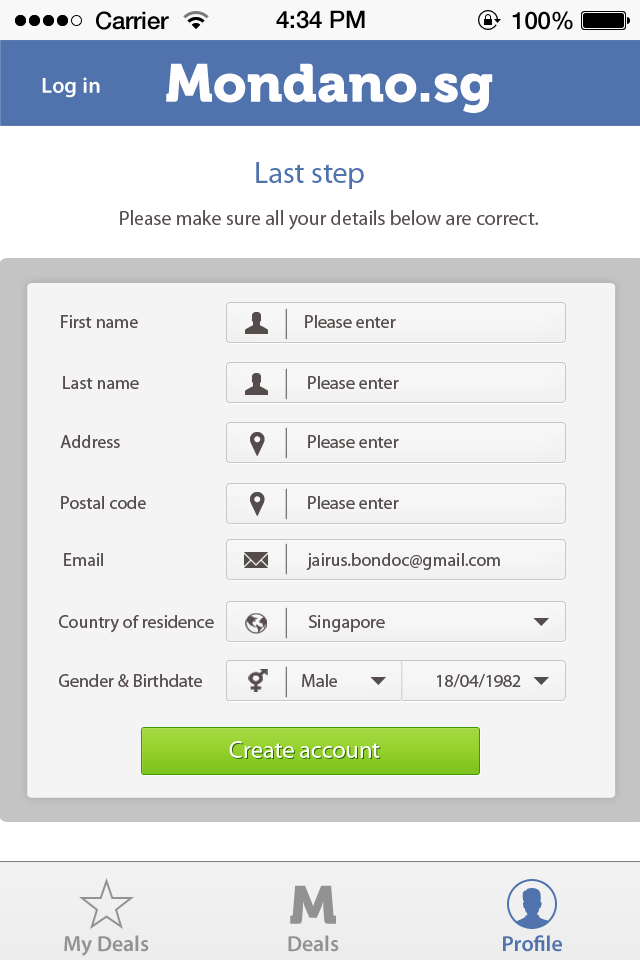
<style>
.page{position:relative;width:640px;height:960px;background:#f4f4f4}
.page>*{position:absolute;margin:0}
.t1{font:24px "HelveticaNeue-Medium";color:#000000}
.t2{font:53.3px "Museo900-Regular";color:#ffffff}
.t3{font:22px "MyriadPro-Semibold";color:#ffffff}
.t4{font:30px "MyriadPro-Regular";color:#5173ad}
.t5{font:20px "MyriadPro-Regular";color:#554c4c}
.t6{font:18px "MyriadPro-Regular";color:#554c4c}
.t7{font:24px "MyriadPro-Regular";color:#ffffff}
.t8{font:53.3px "Museo900-Regular";color:#929292}
.t9{font:22px "MyriadPro-Semibold";color:#929292}
.t10{font:22px "MyriadPro-Semibold";color:#5173ad}
</style>
<div class="page">
<p class="t1" style="left:96px;top:11px;width:73px;height:19px">Carrier</p>
<p class="t1" style="left:276px;top:10px;width:89px;height:19px">4:34 PM</p>
<p class="t1" style="left:512px;top:11px;width:61px;height:19px">100%</p>
<p class="t2" style="left:166px;top:63px;width:327px;height:50px">Mondano.sg</p>
<p class="t3" style="left:42px;top:77px;width:58px;height:21px">Log in</p>
<p class="t4" style="left:256px;top:162px;width:108px;height:27px">Last step</p>
<p class="t5" style="left:120px;top:210px;width:418px;height:20px">Please make sure all your details below are correct.</p>
<p class="t6" style="left:61px;top:315px;width:77px;height:13px">First name</p>
<p class="t6" style="left:305px;top:315px;width:91px;height:13px">Please enter</p>
<p class="t6" style="left:63px;top:376px;width:76px;height:13px">Last name</p>
<p class="t6" style="left:308px;top:376px;width:91px;height:13px">Please enter</p>
<p class="t6" style="left:60px;top:435px;width:60px;height:13px">Address</p>
<p class="t6" style="left:308px;top:435px;width:91px;height:13px">Please enter</p>
<p class="t6" style="left:61px;top:496px;width:85px;height:13px">Postal code</p>
<p class="t6" style="left:308px;top:496px;width:91px;height:13px">Please enter</p>
<p class="t6" style="left:64px;top:553px;width:39px;height:13px">Email</p>
<p class="t6" style="left:306px;top:553px;width:194px;height:17px">jairus.bondoc@gmail.com</p>
<p class="t6" style="left:59px;top:615px;width:155px;height:18px">Country of residence</p>
<p class="t6" style="left:309px;top:615px;width:76px;height:17px">Singapore</p>
<p class="t6" style="left:59px;top:674px;width:143px;height:13px">Gender &amp; Birthdate</p>
<p class="t6" style="left:302px;top:674px;width:35px;height:13px">Male</p>
<p class="t6" style="left:437px;top:674px;width:84px;height:14px">18/04/1982</p>
<p class="t7" style="left:229px;top:741px;width:151px;height:17px">Create account</p>
<p class="t8" style="left:290px;top:885px;width:46px;height:39px">M</p>
<p class="t9" style="left:64px;top:935px;width:85px;height:21px">My Deals</p>
<p class="t9" style="left:288px;top:935px;width:51px;height:17px">Deals</p>
<p class="t10" style="left:503px;top:935px;width:59px;height:17px">Profile</p>
</div>
